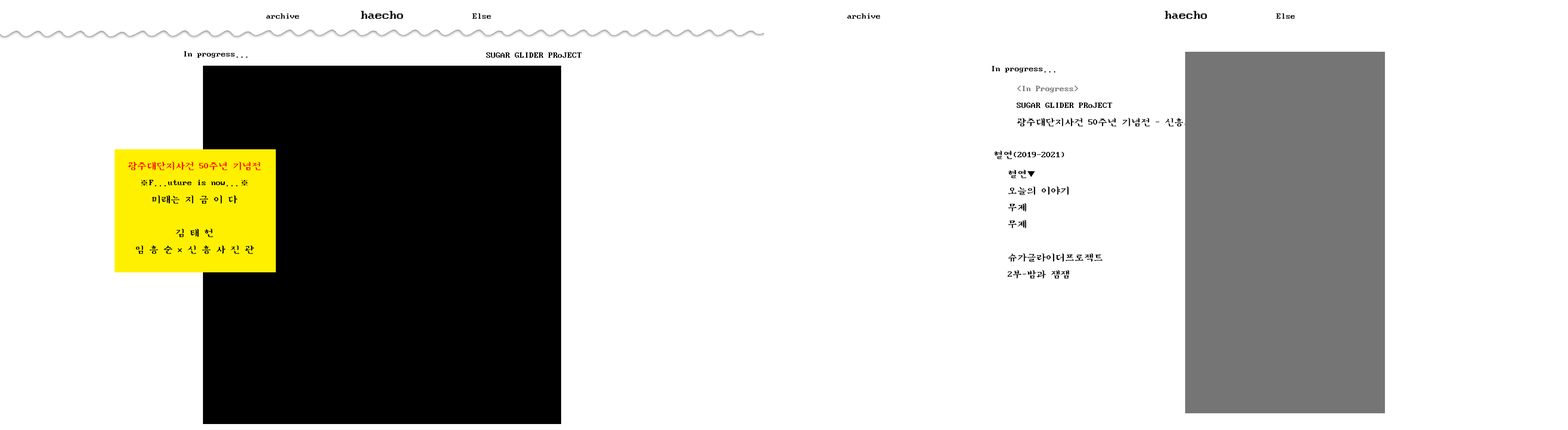
<style>
.page{position:relative;width:1568px;height:430px;background:#ffffff}
.page>*{position:absolute;margin:0}
.t1{font:9.6px "DOSMyungjo";color:#000000}
.t2{font:14.3px "DOSMyungjo";color:#000000}
.t3{font:9.6px "DOSMyungjo";color:#757575}
.t4{font:9.6px "DOSMyungjo";color:#ff0000}
.t5{font:9.6px "Gulim";color:#000000}
</style>
<div class="page">
<p class="t1" style="left:266px;top:13px;width:33px;height:6px">archive</p>
<p class="t2" style="left:361px;top:11px;width:42px;height:8px">haecho</p>
<p class="t1" style="left:472px;top:13px;width:19px;height:6px">Else</p>
<p class="t1" style="left:847px;top:13px;width:33px;height:6px">archive</p>
<p class="t2" style="left:1165px;top:11px;width:42px;height:8px">haecho</p>
<p class="t1" style="left:1276px;top:13px;width:19px;height:6px">Else</p>
<p class="t1" style="left:184px;top:51px;width:64px;height:7px">In progress...</p>
<p class="t1" style="left:486px;top:52px;width:96px;height:6px">SUGAR GLIDER PRoJECT</p>
<p class="t1" style="left:992px;top:66px;width:63px;height:6px">In progress...</p>
<p class="t1" style="left:1016px;top:86px;width:197px;height:41px"><span class="t3">&lt;In Progress&gt;<br></span>SUGAR GLIDER PRoJECT<br>광주대단지사건 50주년 기념전 - 신흥사진관</p>
<p class="t1" style="left:128px;top:162px;width:133px;height:92px;text-align:center"><span class="t4">광주대단지사건 50주년 기념전<br></span><span class="t5">※</span>F...uture is now...<span class="t5">※<br></span>미래는 지 금 이 다<br><br>김 태 헌<br>임 흥 순 x 신 흥 사 진 관</p>
<p class="t1" style="left:994px;top:150px;width:70px;height:9px">혈연(2019-2021)</p>
<p class="t1" style="left:1008px;top:170px;width:95px;height:109px">혈연<span class="t5">▼<br></span>오늘의 이야기<br>무제<br>무제<br><br>슈가글라이더프로젝트<br>2부-밤과 잼잼</p>
</div>
